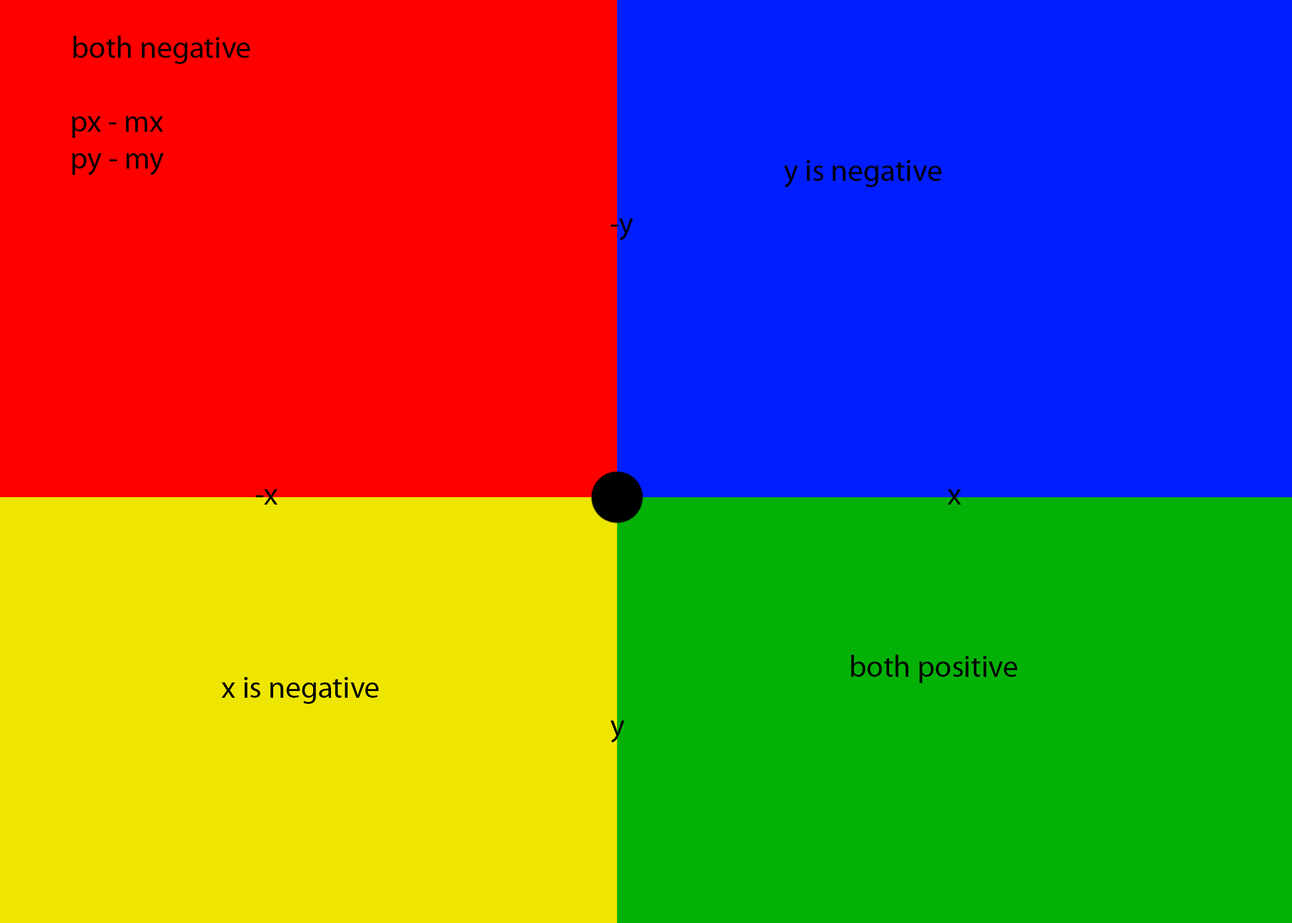
<style>
.page{position:relative;width:1292px;height:923px;background:#001eff}
.page>*{position:absolute;margin:0}
.t1{font:30.8px "MyriadPro-Regular";color:#000000}
</style>
<div class="page">
<p class="t1" style="left:73px;top:36px;width:177px;height:28px">both negative</p>
<p class="t1" style="left:72px;top:116px;width:92px;height:59px">px - mx<br>py - my</p>
<p class="t1" style="left:784px;top:160px;width:158px;height:28px">y is negative</p>
<p class="t1" style="left:610px;top:218px;width:23px;height:23px">-y</p>
<p class="t1" style="left:255px;top:489px;width:23px;height:16px">-x</p>
<p class="t1" style="left:948px;top:489px;width:14px;height:16px">x</p>
<p class="t1" style="left:851px;top:655px;width:167px;height:28px">both positive</p>
<p class="t1" style="left:221px;top:677px;width:158px;height:27px">x is negative</p>
<p class="t1" style="left:610px;top:720px;width:14px;height:23px">y</p>
</div>
